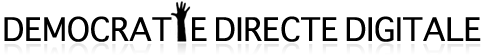
<style>
.page{position:relative;width:481px;height:55px;background:#ffffff}
.page>*{position:absolute;margin:0}
.t1{font:31.2px "Sathu";color:#000000}
.t2{font:31.2px "Sathu";color:#f1f1f1}
</style>
<div class="page">
<p class="t1" style="left:4px;top:16px;width:477px;height:26px">DEMOCRAT   E DIRECTE DIGITALE</p>
<p class="t2" style="left:4px;top:43px;width:477px;height:12px">DEMOCRAT   E DIRECTE DIGITALE</p>
</div>
